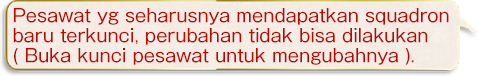
<style>
.page{position:relative;width:478px;height:76px}
.page>*{position:absolute;margin:0}
.t1{font:18px/20px "GothicMB101Pro-Regular";color:#bd0800}
</style>
<div class="page">
<p class="t1" style="left:13px;top:8px;width:436px;height:57px">Pesawat yg seharusnya mendapatkan squadron<br>baru terkunci, perubahan tidak bisa dilakukan<br>( Buka kunci pesawat untuk mengubahnya ).</p>
</div>
